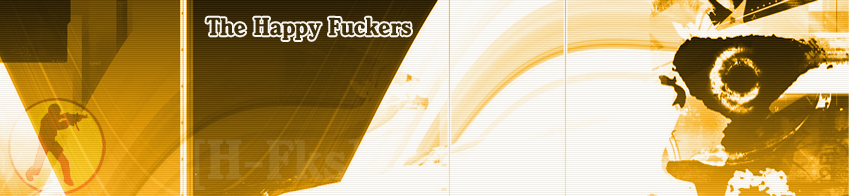
<style>
.page{position:relative;width:849px;height:196px}
.page>*{position:absolute;margin:0}
.t1{font:24px "Heineken";color:#3d2b00}
</style>
<div class="page">
<p class="t1" style="left:206px;top:17px;width:205px;height:23px">The Happy Fuckers</p>
</div>
